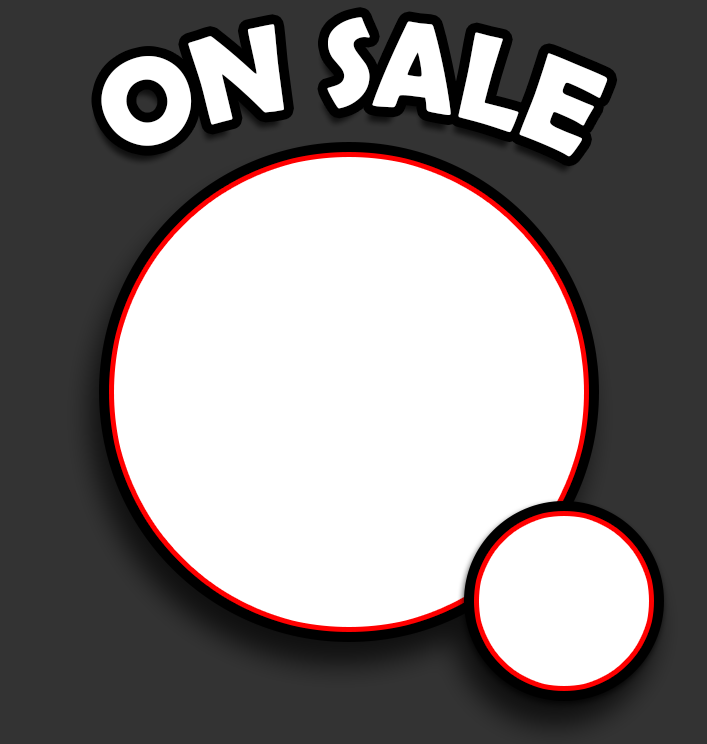
<style>
.page{position:relative;width:707px;height:744px;background:#ffffff}
.page>*{position:absolute;margin:0}
.t1{font:125px "BerlinSansFBDemi-Bold";letter-spacing:0.025em;color:#ffffff;scale:0.85 1}
</style>
<div class="page">
<p class="t1" style="left:101px;top:17px;width:507px;height:140px">ON SALE</p>
</div>
